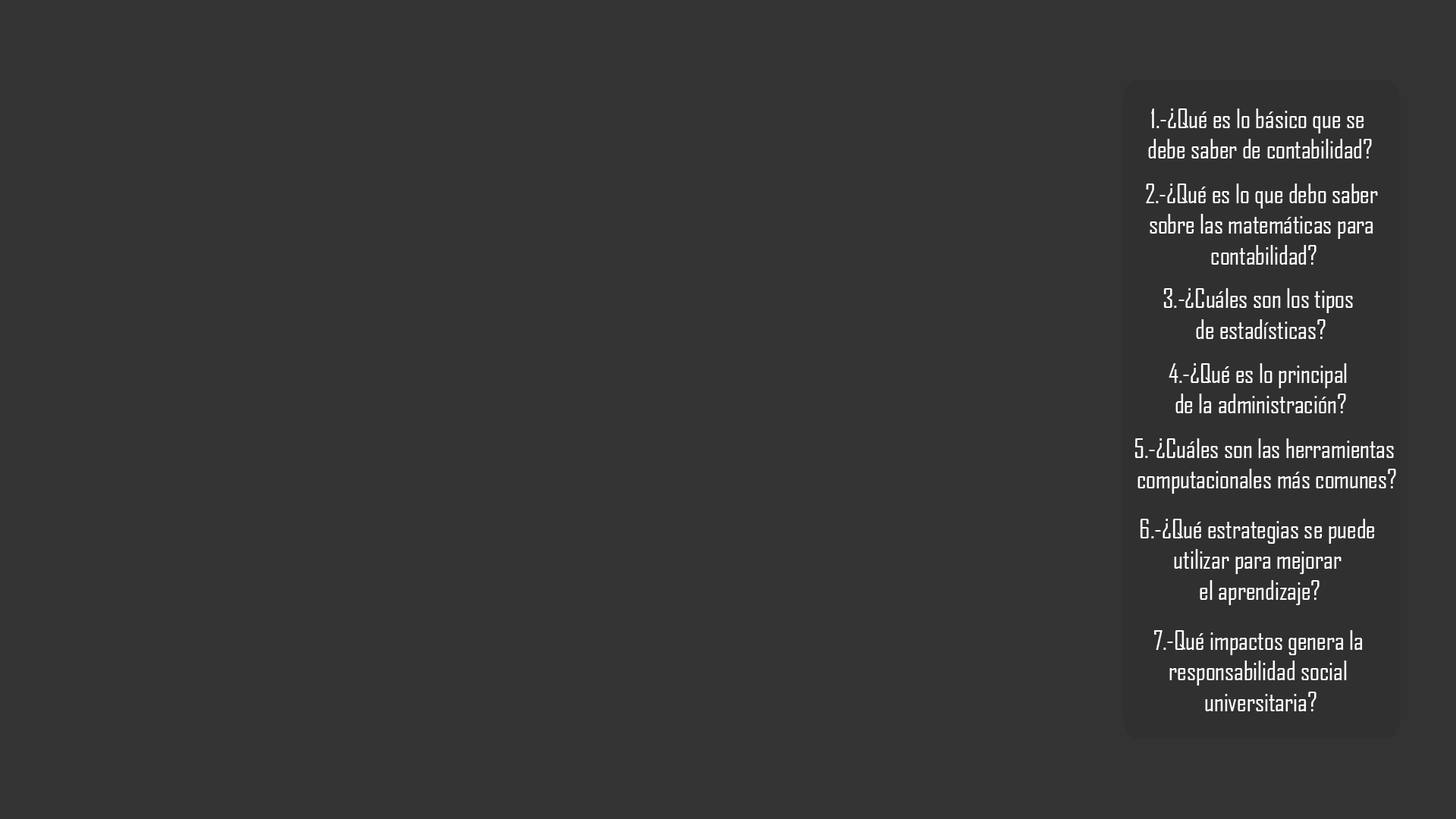
<style>
.page{position:relative;width:1456px;height:819px;background:#333333}
.page>*{position:absolute;margin:0}
.t1{font:25.5px "AgencyFB-Reg";color:#ffffff}
</style>
<div class="page">
<p class="t1" style="left:1148px;top:108px;width:224px;height:50px;text-align:center">1.-¿Qué es lo básico que se <br>debe saber de contabilidad?</p>
<p class="t1" style="left:1146px;top:184px;width:232px;height:81px;text-align:center">2.-¿Qué es lo que debo saber <br>sobre las matemáticas para <br>contabilidad?</p>
<p class="t1" style="left:1163px;top:288px;width:190px;height:51px;text-align:center">3.-¿Cuáles son los tipos <br>de estadísticas?</p>
<p class="t1" style="left:1169px;top:363px;width:178px;height:50px;text-align:center">4.-¿Qué es lo principal <br>de la administración?</p>
<p class="t1" style="left:1134px;top:438px;width:262px;height:56px;text-align:center">5.-¿Cuáles son las herramientas <br>computacionales más comunes?</p>
<p class="t1" style="left:1140px;top:519px;width:235px;height:86px;text-align:center">6.-¿Qué estrategias se puede <br>utilizar para mejorar <br>el aprendizaje?</p>
<p class="t1" style="left:1154px;top:630px;width:209px;height:81px;text-align:center">7.-Qué impactos genera la <br>responsabilidad social <br>universitaria?</p>
</div>
